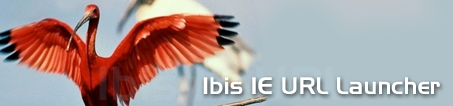
<style>
.page{position:relative;width:453px;height:106px}
.page>*{position:absolute;margin:0}
.t1{font:24px "Slicker";color:#ffffff}
</style>
<div class="page">
<p class="t1" style="left:203px;top:77px;width:237px;height:17px">Ibis IE URL Launcher</p>
</div>
